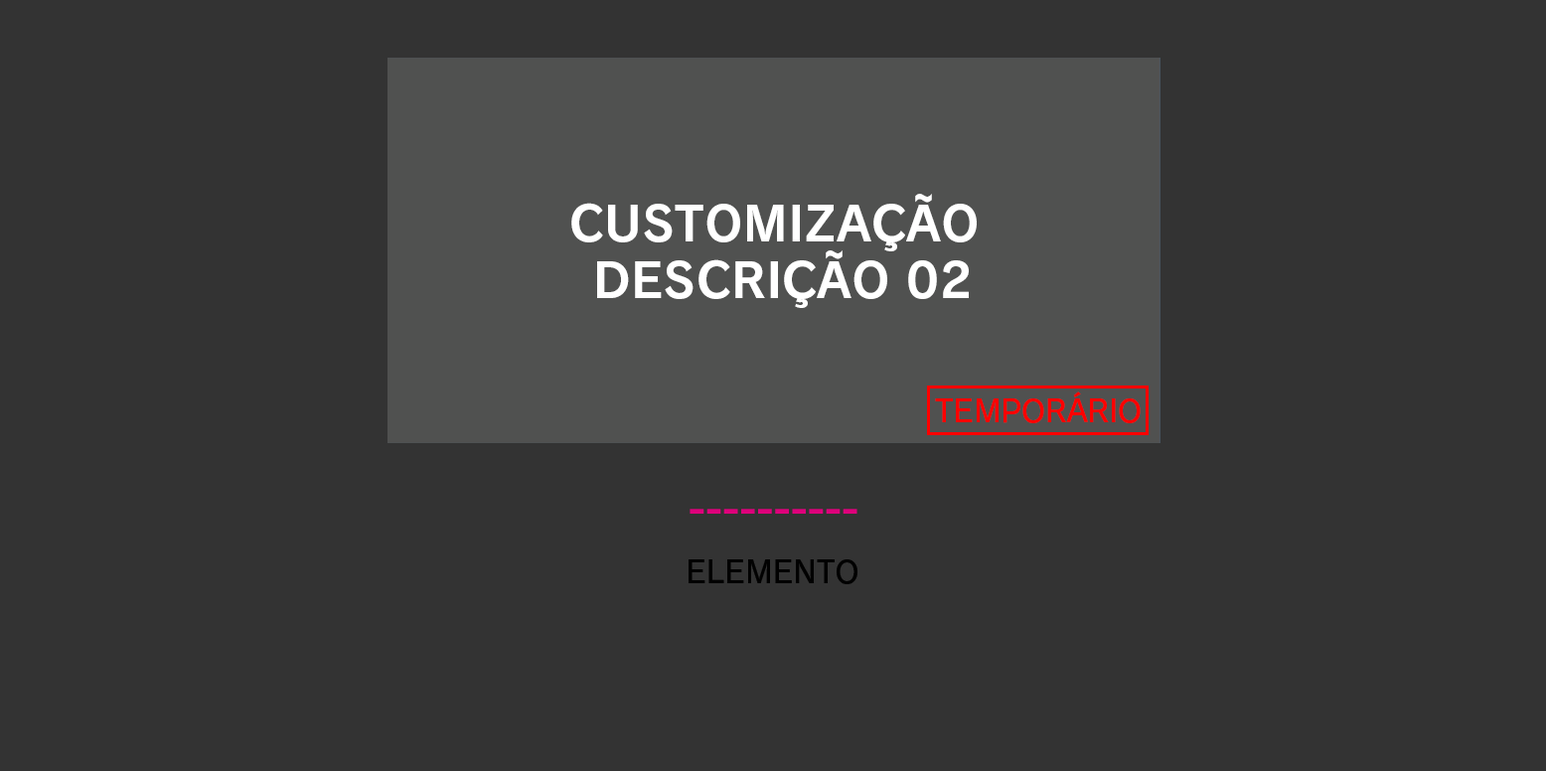
<style>
.page{position:relative;width:1546px;height:771px;background:#333333}
.page>*{position:absolute;margin:0}
.t1{font:47.7px "RodinNTLGPro-B";color:#ffffff}
.t2{font:30.5px "RodinProN-DB";letter-spacing:-0.014em;color:#ff0000}
.t3{font:30.5px "RodinNTLGPro-DB";color:#010101}
</style>
<div class="page">
<p class="t1" style="left:571px;top:194px;width:406px;height:114px;text-align:center">CUSTOMIZAÇÃO <br>DESCRIÇÃO 02</p>
<p class="t2" style="left:935px;top:392px;width:206px;height:31px">TEMPORÁRIO</p>
<p class="t3" style="left:689px;top:559px;width:169px;height:25px">ELEMENTO</p>
</div>
